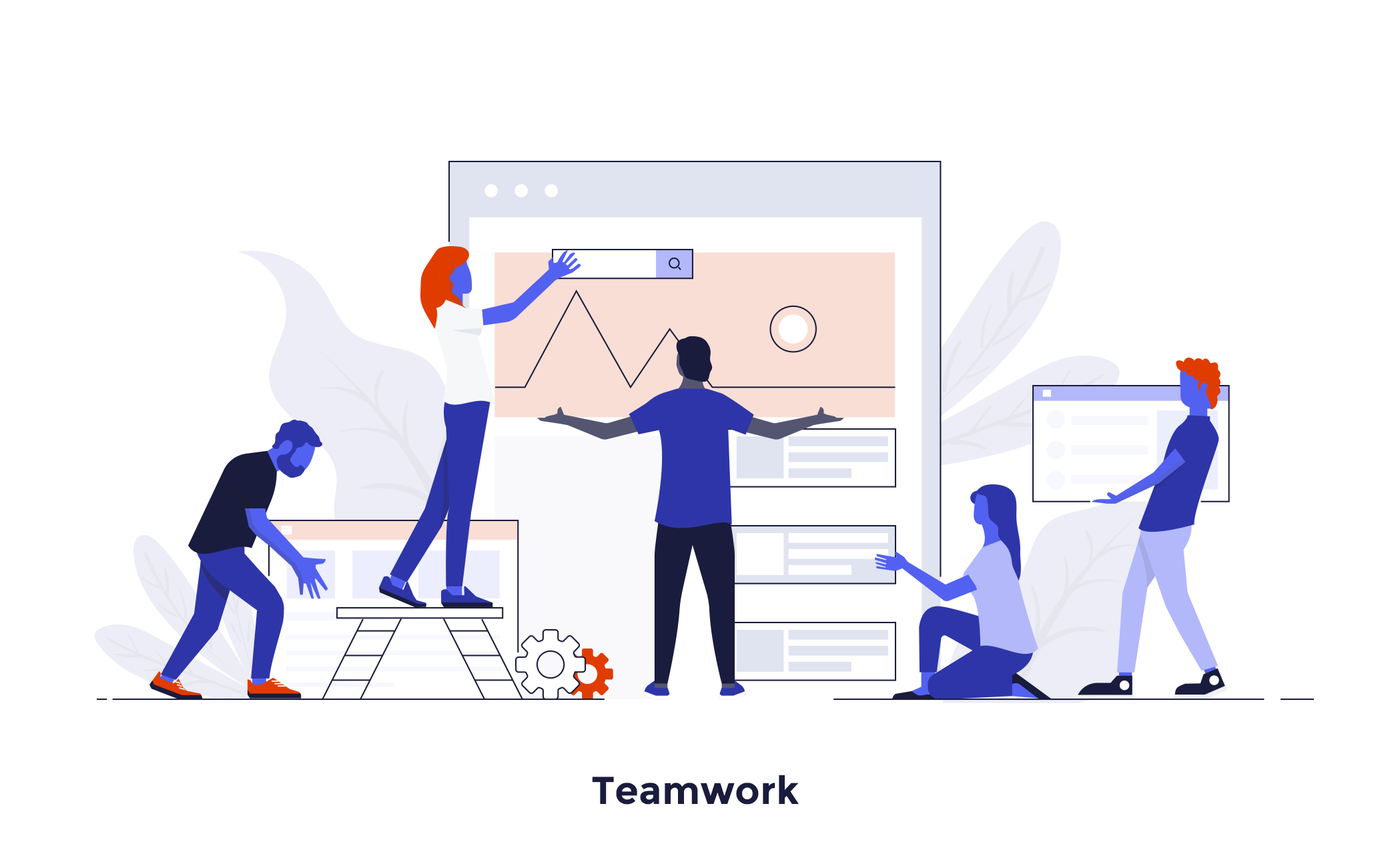
<style>
.page{position:relative;width:1390px;height:858px;background:#ffffff}
.page>*{position:absolute;margin:0}
.t1{font:38.9px "Montserrat-Bold";color:#191c3c}
</style>
<div class="page">
<p class="t1" style="left:592px;top:775px;width:207px;height:30px">Teamwork</p>
</div>
